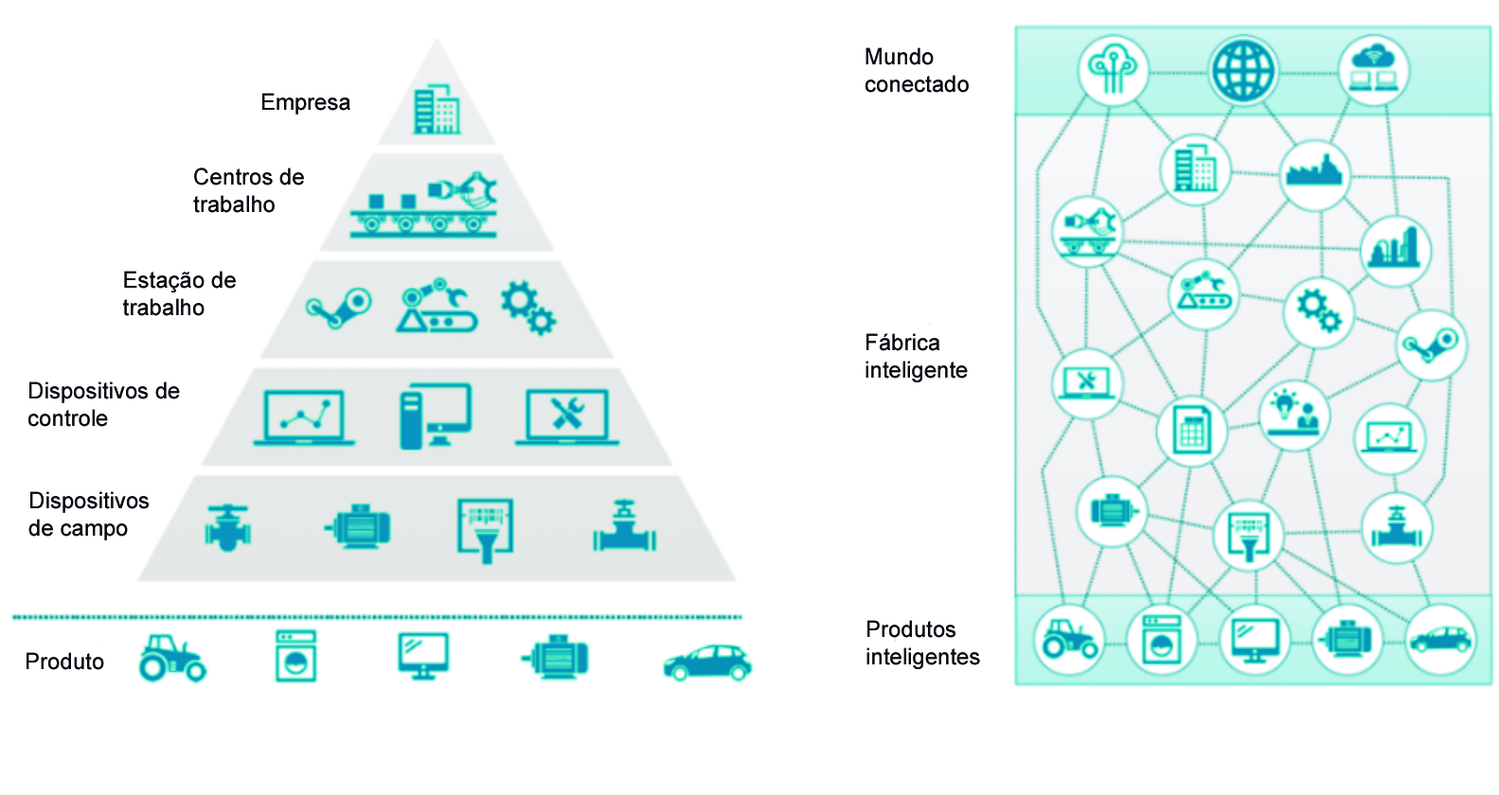
<style>
.page{position:relative;width:1499px;height:795px;background:#ffffff}
.page>*{position:absolute;margin:0}
.t1{font:22.7px "ArialMT";color:#08090e}
</style>
<div class="page">
<p class="t1" style="left:866px;top:47px;width:103px;height:46px">Mundo <br>conectado</p>
<p class="t1" style="left:262px;top:93px;width:88px;height:22px">Empresa</p>
<p class="t1" style="left:193px;top:168px;width:111px;height:45px">Centros de <br>trabalho</p>
<p class="t1" style="left:123px;top:271px;width:113px;height:45px">Estação de <br>trabalho</p>
<p class="t1" style="left:866px;top:333px;width:102px;height:50px">Fábrica <br>inteligente</p>
<p class="t1" style="left:28px;top:382px;width:152px;height:45px">Dispositivos de <br>controle</p>
<p class="t1" style="left:28px;top:491px;width:121px;height:50px">Dispositivos <br>de campo</p>
<p class="t1" style="left:866px;top:620px;width:114px;height:50px">Produtos <br>inteligentes</p>
<p class="t1" style="left:27px;top:652px;width:77px;height:18px">Produto</p>
</div>
